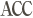
<style>
.page{position:relative;width:33px;height:18px;background:#ffffff}
.page>*{position:absolute;margin:0}
.t1{font:20px "RyuminPro-ExBold";letter-spacing:-0.08em;color:#4c4841;scale:0.83 1}
</style>
<div class="page">
<p class="t1" style="left:0px;top:1px;width:33px;height:15px">ACC</p>
</div>
